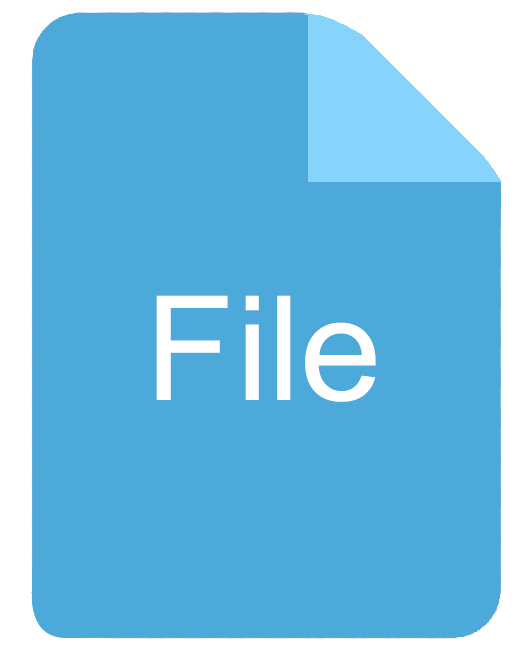
<style>
.page{position:relative;width:528px;height:661px;background:#4ca9da}
.page>*{position:absolute;margin:0}
.t1{font:145.4px "ArialMT";color:#ffffff}
</style>
<div class="page">
<p class="t1" style="left:156px;top:295px;width:220px;height:107px">File</p>
</div>
